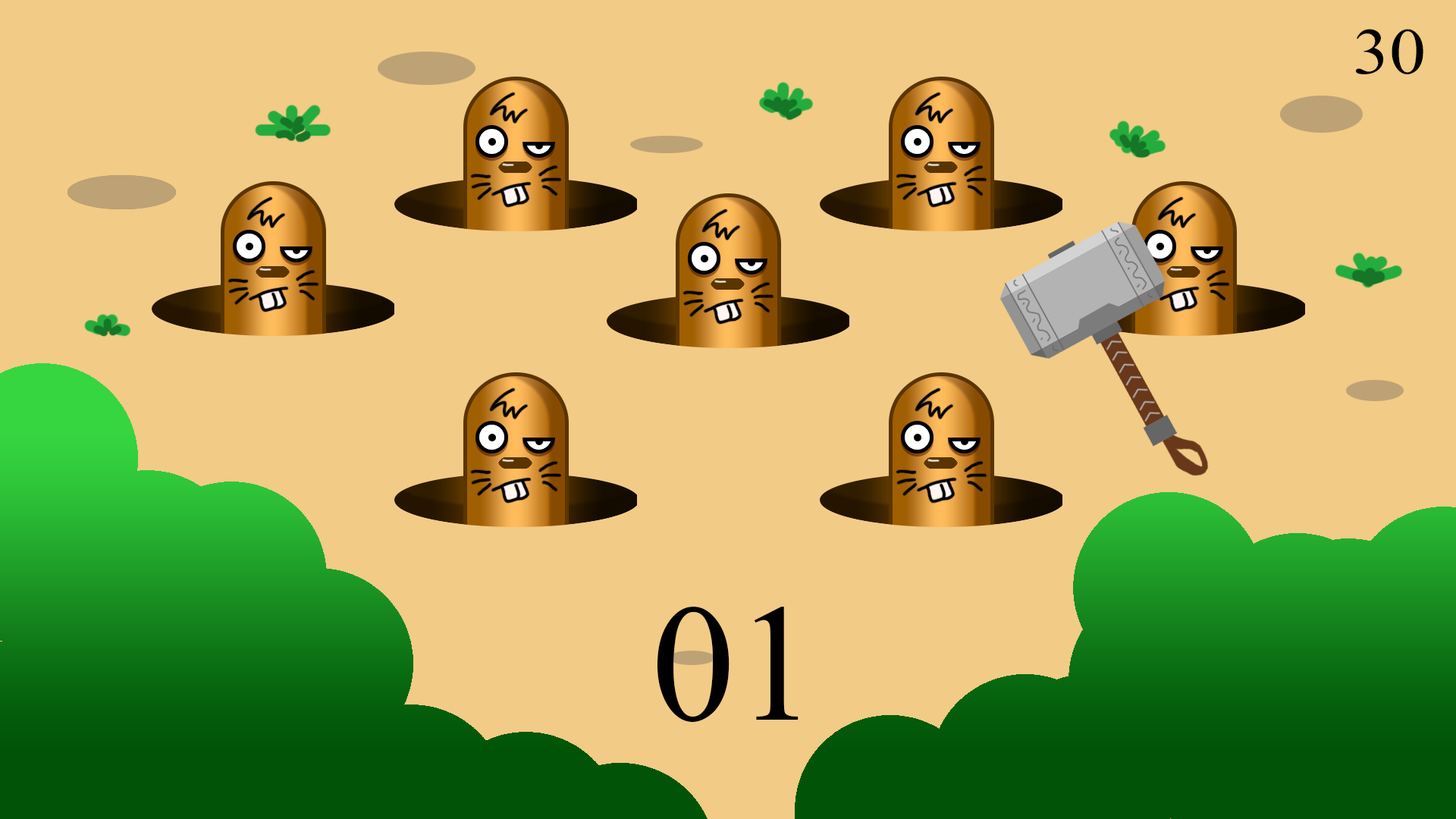
<style>
.page{position:relative;width:1456px;height:819px;background:#f2cb86}
.page>*{position:absolute;margin:0}
.t1{font:65.6px "MongolianBaiti";color:#000000;scale:1.11 1}
.t2{font:166.8px "MongolianBaiti";color:#000000}
</style>
<div class="page">
<p class="t1" style="left:1356px;top:29px;width:67px;height:45px">30</p>
<p class="t2" style="left:657px;top:607px;width:142px;height:115px">01</p>
</div>
